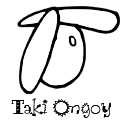
<style>
.page{position:relative;width:125px;height:125px;background:#ffffff}
.page>*{position:absolute;margin:0}
.t1{font:20.8px "ScruffPlain";color:#000000}
</style>
<div class="page">
<p class="t1" style="left:11px;top:98px;width:101px;height:20px">Taki Ongoy</p>
</div>
